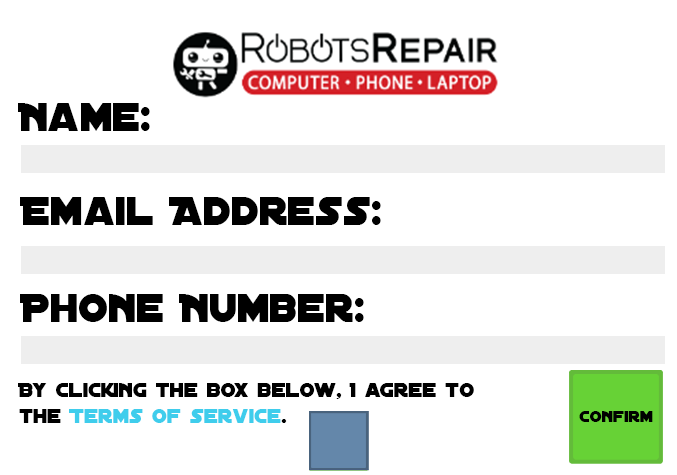
<style>
.page{position:relative;width:677px;height:475px;background:#ffffff}
.page>*{position:absolute;margin:0}
.t1{font:43px "DistantGalaxy";color:#000000}
.t2{font:21.7px "DistantGalaxy";color:#000000}
.t3{font:21.7px "DistantGalaxy";color:#3fcdec}
.t4{font:17.2px "DistantGalaxy";color:#000000}
</style>
<div class="page">
<p class="t1" style="left:18px;top:103px;width:132px;height:28px">Name:</p>
<p class="t1" style="left:20px;top:197px;width:361px;height:28px">Email Address:</p>
<p class="t1" style="left:20px;top:294px;width:344px;height:28px">Phone Number:</p>
<p class="t2" style="left:18px;top:383px;width:456px;height:40px">By Clicking the box below, I agree to<br>the <span class="t3">Terms of service</span>.</p>
<p class="t4" style="left:579px;top:411px;width:74px;height:11px">Confirm</p>
</div>
